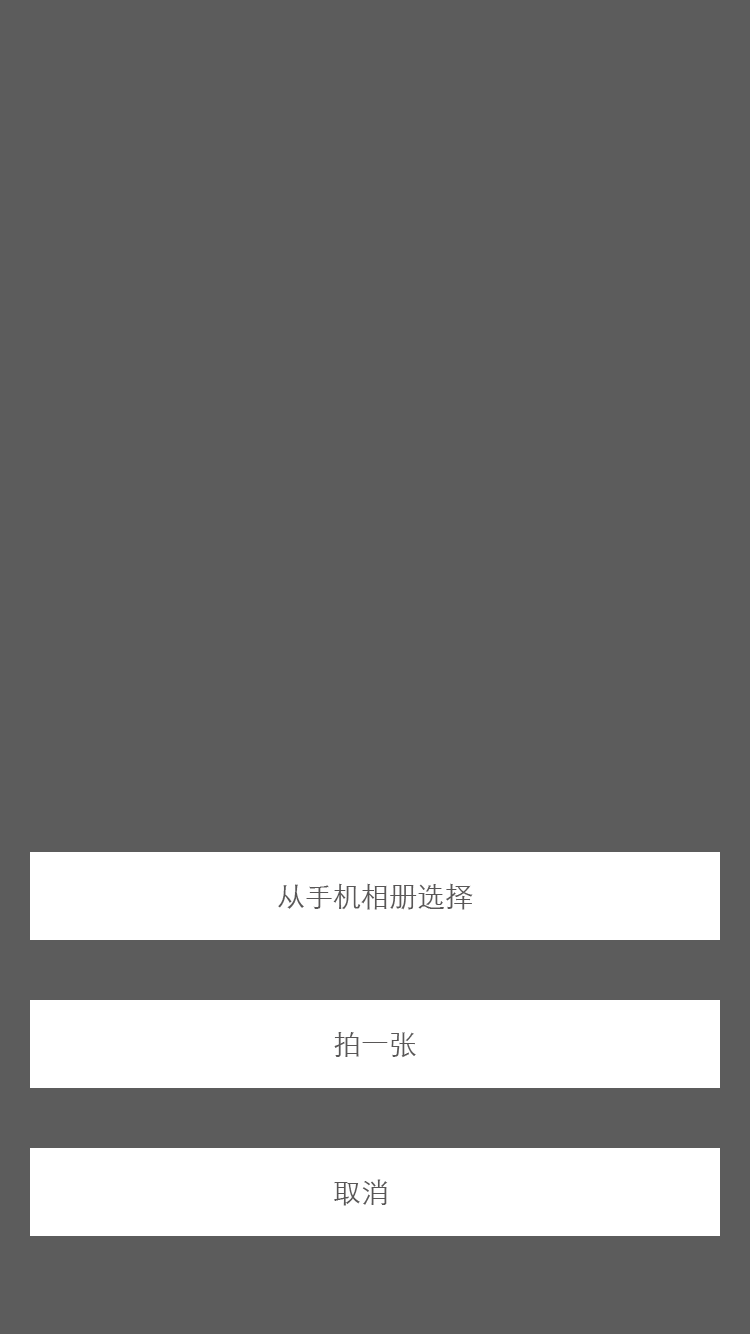
<style>
.page{position:relative;width:750px;height:1334px;background:#5c5c5c}
.page>*{position:absolute;margin:0}
.t1{font:28px "STXihei";color:#595757}
</style>
<div class="page">
<p class="t1" style="left:278px;top:883px;width:195px;height:27px">从手机相册选择</p>
<p class="t1" style="left:334px;top:1032px;width:82px;height:26px">拍一张</p>
<p class="t1" style="left:334px;top:1179px;width:54px;height:27px">取消</p>
</div>
